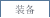
<style>
.page{position:relative;width:50px;height:18px;background:#ffffff}
.page>*{position:absolute;margin:0}
.t1{font:10px "SimSun"}
</style>
<div class="page">
<p class="t1" style="left:15px;top:4px;width:20px;height:10px">装备</p>
</div>
